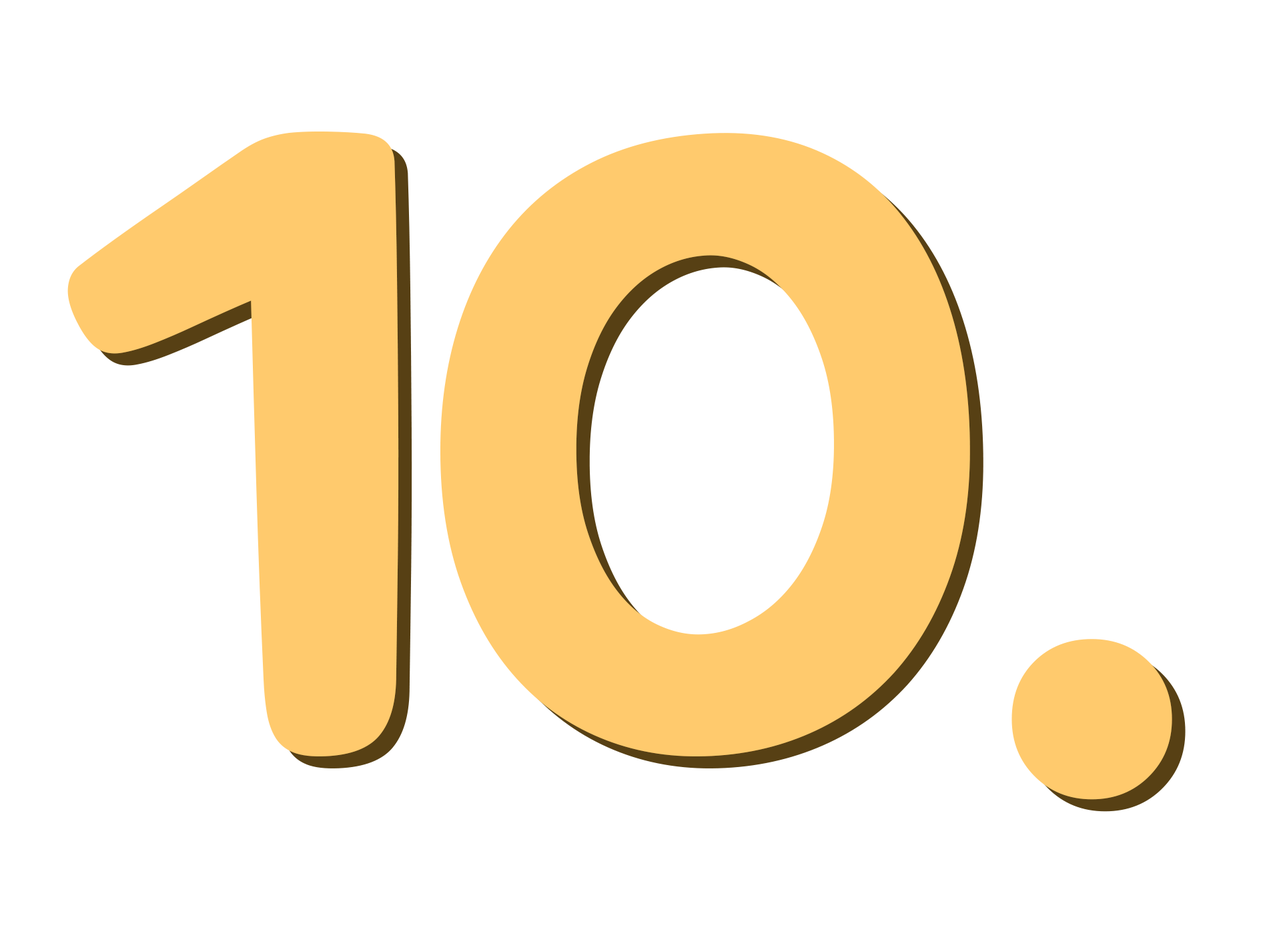
<style>
.page{position:relative;width:1261px;height:946px;background:#ffffff}
.page>*{position:absolute;margin:0}
.t1{font:834.1px "MaplestoryBold";color:#ffca6d}
</style>
<div class="page">
<p class="t1" style="left:67px;top:131px;width:1105px;height:668px">10.</p>
<p class="t1" style="left:81px;top:143px;width:1105px;height:668px">10.</p>
</div>
